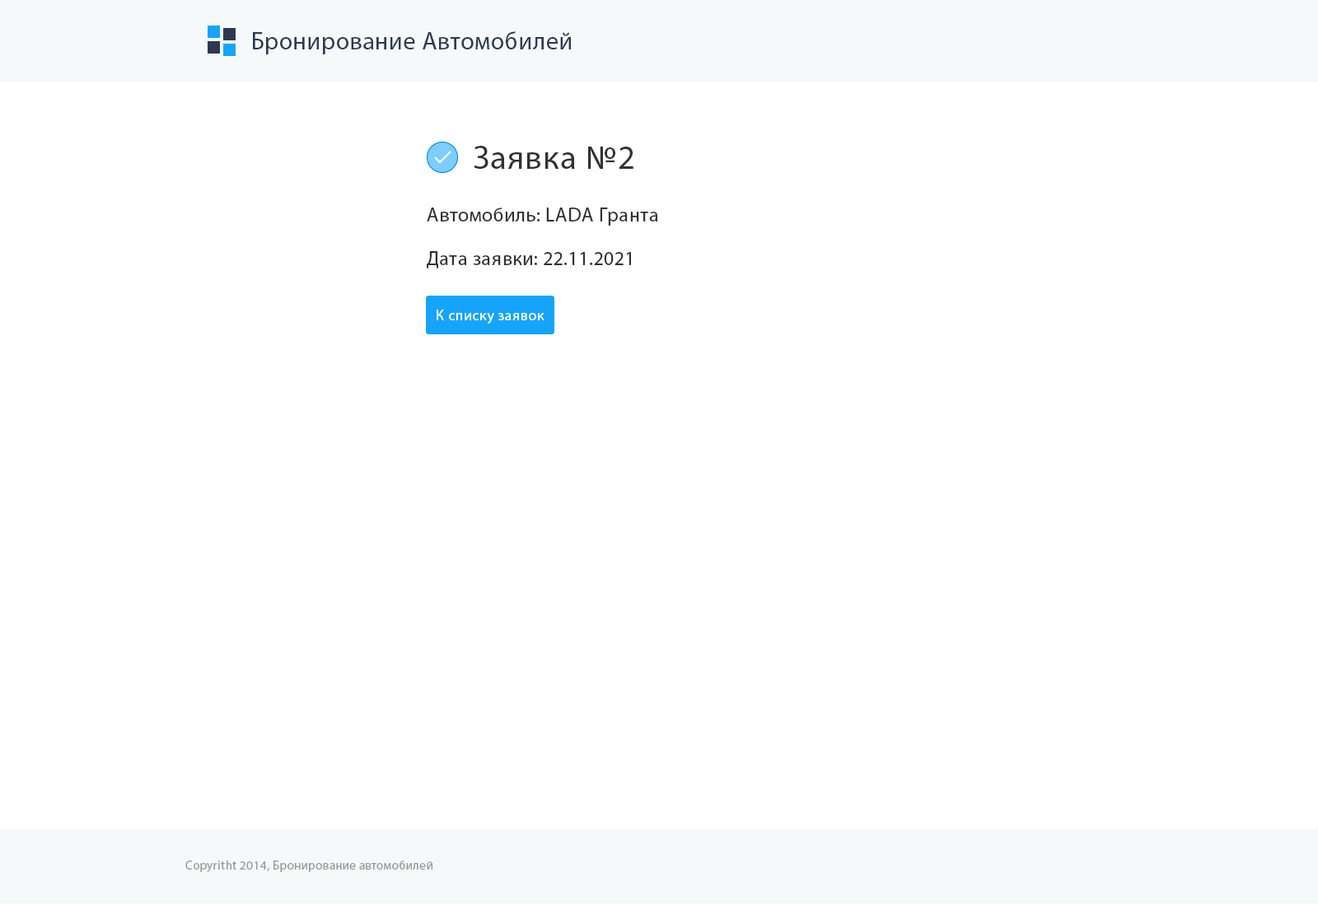
<style>
.page{position:relative;width:1318px;height:905px;background:#ffffff}
.page>*{position:absolute;margin:0}
.t1{font:24.7px "MyriadPro-Regular";letter-spacing:0.025em;color:#2d3950}
.t2{font:33.8px "MyriadPro-Regular";letter-spacing:0.025em;color:#303134}
.t3{font:19.8px "MyriadPro-Regular";letter-spacing:0.025em;color:#303134}
.t4{font:14.8px "MyriadPro-Regular";letter-spacing:0.025em;color:#ffffff}
.t5{font:12.4px "MyriadPro-Regular";letter-spacing:0.025em;color:#999999}
</style>
<div class="page">
<p class="t1" style="left:253px;top:31px;width:318px;height:23px">Бронирование Автомобилей</p>
<p class="t2" style="left:474px;top:146px;width:159px;height:23px">Заявка №2</p>
<p class="t3" style="left:427px;top:208px;width:231px;height:18px">Автомобиль: LADA Гранта</p>
<p class="t3" style="left:427px;top:251px;width:204px;height:17px">Дата заявки: 22.11.2021</p>
<p class="t4" style="left:436px;top:310px;width:108px;height:14px">К списку заявок</p>
<p class="t5" style="left:185px;top:861px;width:247px;height:11px">Copyritht 2014, Бронирование автомобилей</p>
</div>
